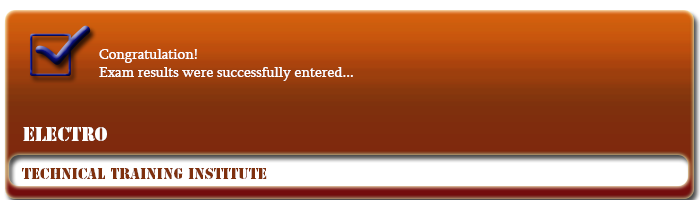
<style>
.page{position:relative;width:700px;height:200px}
.page>*{position:absolute;margin:0}
.t1{font:15px "Sylfaen";color:#ffffff}
.t2{font:18px "StencilStd";color:#ffffff}
.t3{font:14px "StencilStd";color:#7f300d}
</style>
<div class="page">
<p class="t1" style="left:99px;top:49px;width:254px;height:32px">Congratulation!<br>Exam results were successfully entered...</p>
<p class="t2" style="left:23px;top:127px;width:84px;height:14px">ELECTRO</p>
<p class="t3" style="left:22px;top:168px;width:245px;height:11px">Technical Training Institute</p>
</div>
